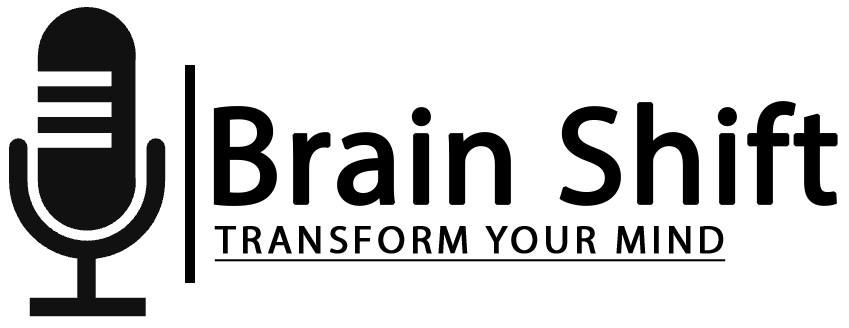
<style>
.page{position:relative;width:849px;height:328px;background:#ffffff}
.page>*{position:absolute;margin:0}
.t1{font:140px "MyriadPro-Regular";color:#000000;font-weight:bold}
.t2{font:40px "MyriadPro-Regular";letter-spacing:0.1em;color:#000000;font-weight:bold;text-decoration:underline}
</style>
<div class="page">
<p class="t1" style="left:213px;top:101px;width:625px;height:105px">Brain Shift</p>
<p class="t2" style="left:214px;top:226px;width:512px;height:36px">TRANSFORM YOUR MIND</p>
</div>
